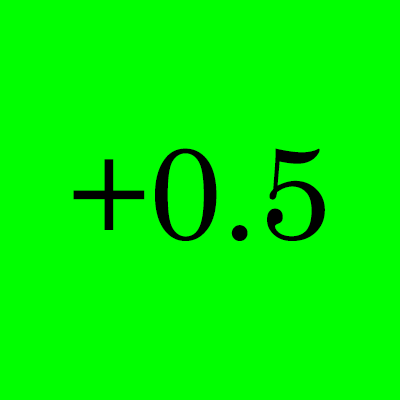
<style>
.page{position:relative;width:400px;height:400px;background:#00ff00}
.page>*{position:absolute;margin:0}
.t1{font:225px "Century";color:#000000}
</style>
<div class="page">
<p class="t1" style="left:73px;top:148px;width:252px;height:93px">+0.5</p>
</div>
